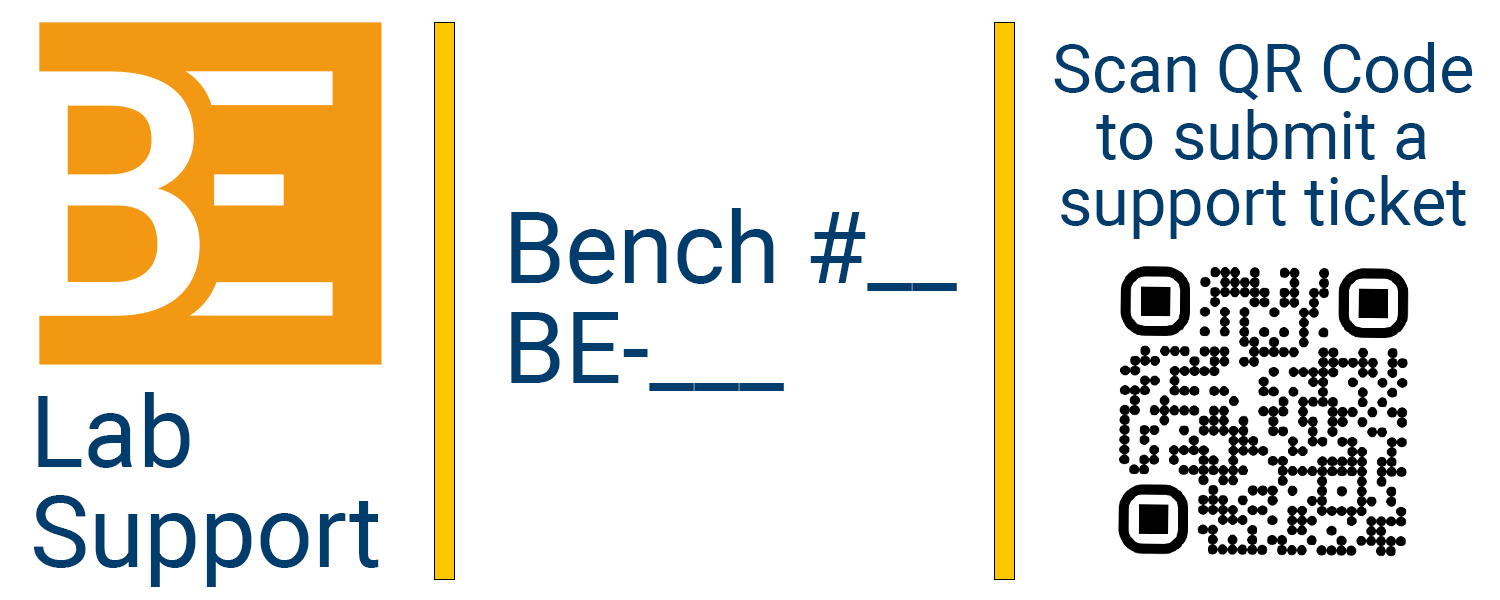
<style>
.page{position:relative;width:1500px;height:600px;background:#ffffff}
.page>*{position:absolute;margin:0}
.t1{font:66.7px/66.7px "Roboto-Regular";color:#003c6c}
.t2{font:100px/100px "Roboto-Regular";color:#003c6c}
</style>
<div class="page">
<p class="t1" style="left:1054px;top:42px;width:419px;height:197px;text-align:center">Scan QR Code to submit a support ticket</p>
<p class="t2" style="left:511px;top:208px;width:446px;height:183px">Bench #__<br>BE-___</p>
<p class="t2" style="left:33px;top:392px;width:346px;height:195px">Lab<br>Support</p>
</div>
